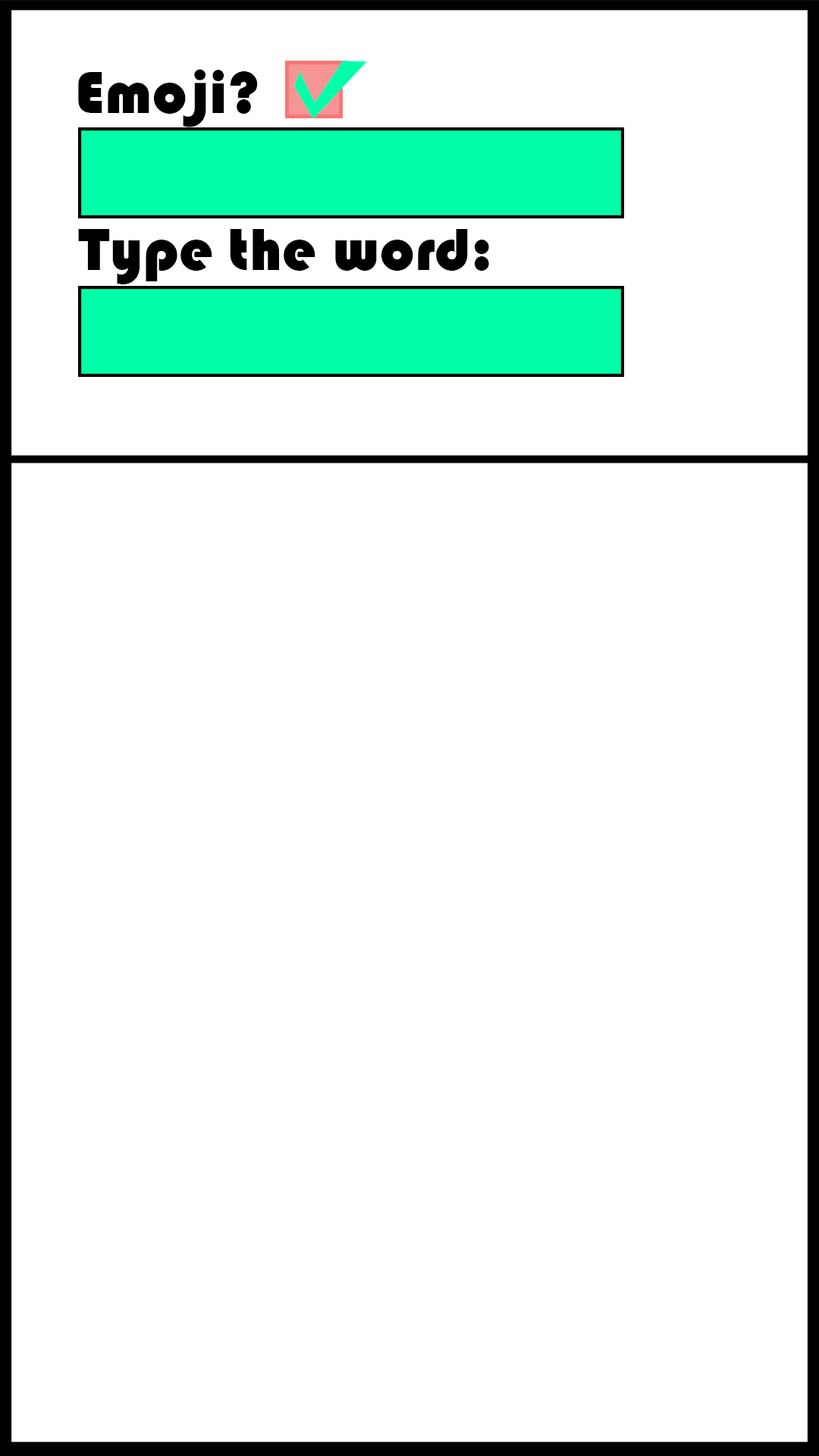
<style>
.page{position:relative;width:819px;height:1456px;background:#ffffff}
.page>*{position:absolute;margin:0}
.t1{font:61.8px "Bauhaus93";color:#000000}
</style>
<div class="page">
<p class="t1" style="left:78px;top:69px;width:180px;height:58px">Emoji?</p>
<p class="t1" style="left:78px;top:229px;width:411px;height:55px">Type the word:</p>
</div>
